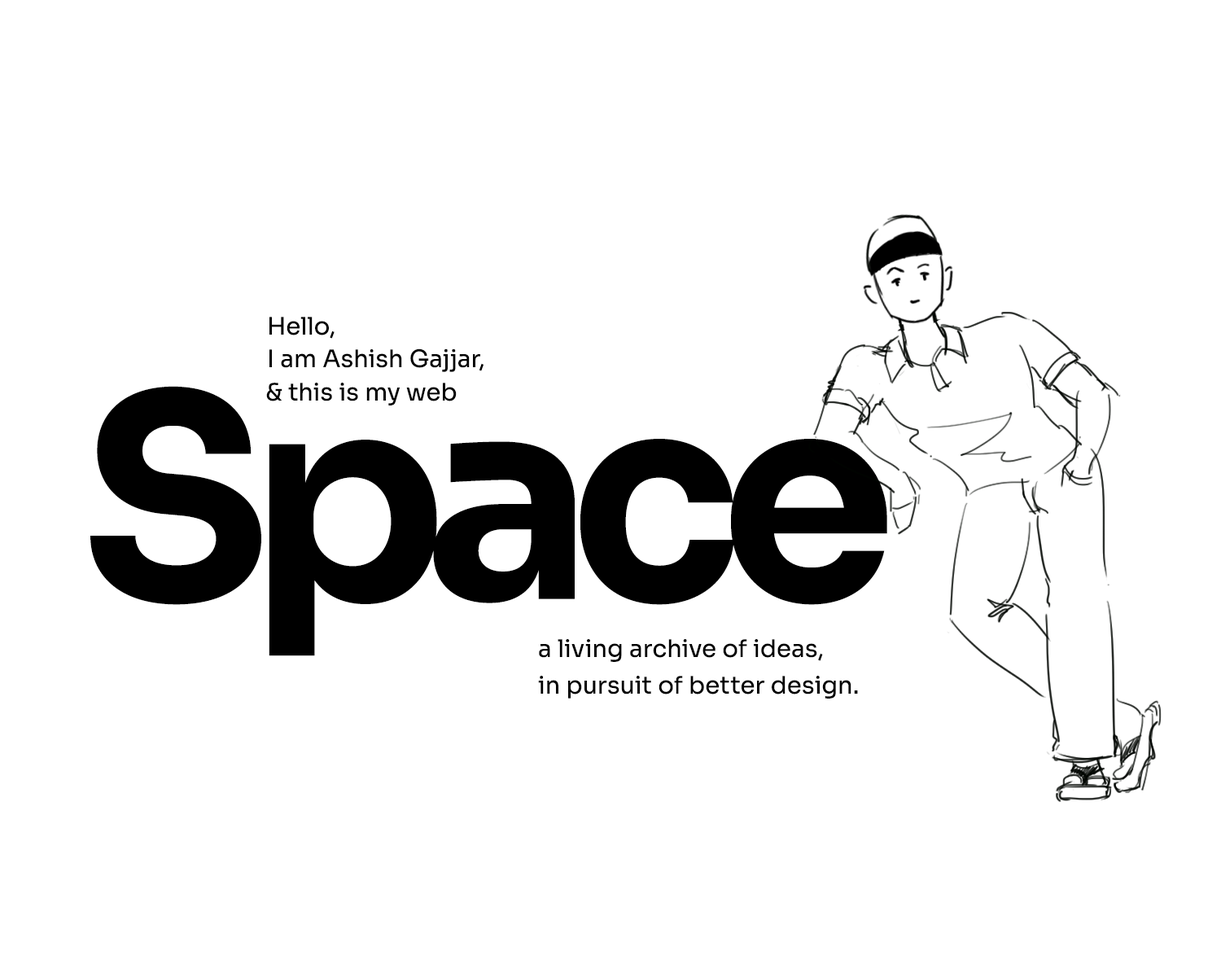
<style>
.page{position:relative;width:1221px;height:977px;background:#ffffff}
.page>*{position:absolute;margin:0}
.t1{font:23.7px "Sora-Regular";letter-spacing:0.01em;color:#000000}
.t2{font:282.3px "Sora-Bold";letter-spacing:-0.075em;color:#000000}
</style>
<div class="page">
<p class="t1" style="left:269px;top:317px;width:66px;height:22px">Hello,</p>
<p class="t1" style="left:269px;top:348px;width:214px;height:24px">I am Ashish Gajjar,</p>
<p class="t2" style="left:90px;top:386px;width:797px;height:270px">Space</p>
<p class="t1" style="left:266px;top:383px;width:191px;height:22px">&amp; this is my web</p>
<p class="t1" style="left:539px;top:639px;width:284px;height:23px">a living archive of ideas,</p>
<p class="t1" style="left:538px;top:676px;width:320px;height:22px">in pursuit of better design.</p>
</div>
